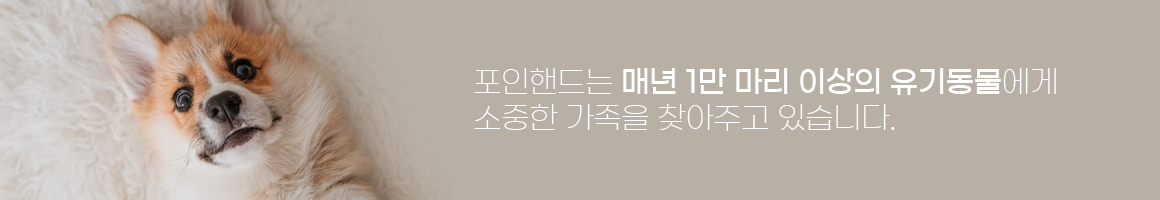
<style>
.page{position:relative;width:1160px;height:200px;background:#b8afa5}
.page>*{position:absolute;margin:0}
.t1{font:30px "GmarketSansTTFLight";letter-spacing:-0.025em;color:#ffffff}
.t2{font:30px "GmarketSansTTFMedium";letter-spacing:-0.025em;color:#ffffff}
</style>
<div class="page">
<p class="t1" style="left:474px;top:68px;width:582px;height:63px">포인핸드는 <span class="t2">매년 1만 마리 이상의 유기동물</span>에게<br>소중한 가족을 찾아주고 있습니다.</p>
<p class="t1" style="left:474px;top:68px;width:582px;height:63px">포인핸드는 <span class="t2">매년 1만 마리 이상의 유기동물</span>에게<br>소중한 가족을 찾아주고 있습니다.</p>
</div>
